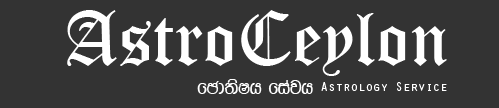
<style>
.page{position:relative;width:499px;height:108px;background:#333333}
.page>*{position:absolute;margin:0}
.t1{font:75px "OldEnglishTextMT";color:#ffffff}
.t2{font:20.6px "0KDSAMAN";color:#ffffff}
.t3{font:12.5px "OratorStd";color:#ffffff}
</style>
<div class="page">
<p class="t1" style="left:67px;top:10px;width:380px;height:66px">AstroCeylon</p>
<p class="t2" style="left:197px;top:79px;width:116px;height:15px">fcd;sIh fiajh</p>
<p class="t3" style="left:321px;top:82px;width:126px;height:9px">Astrology Service</p>
</div>
